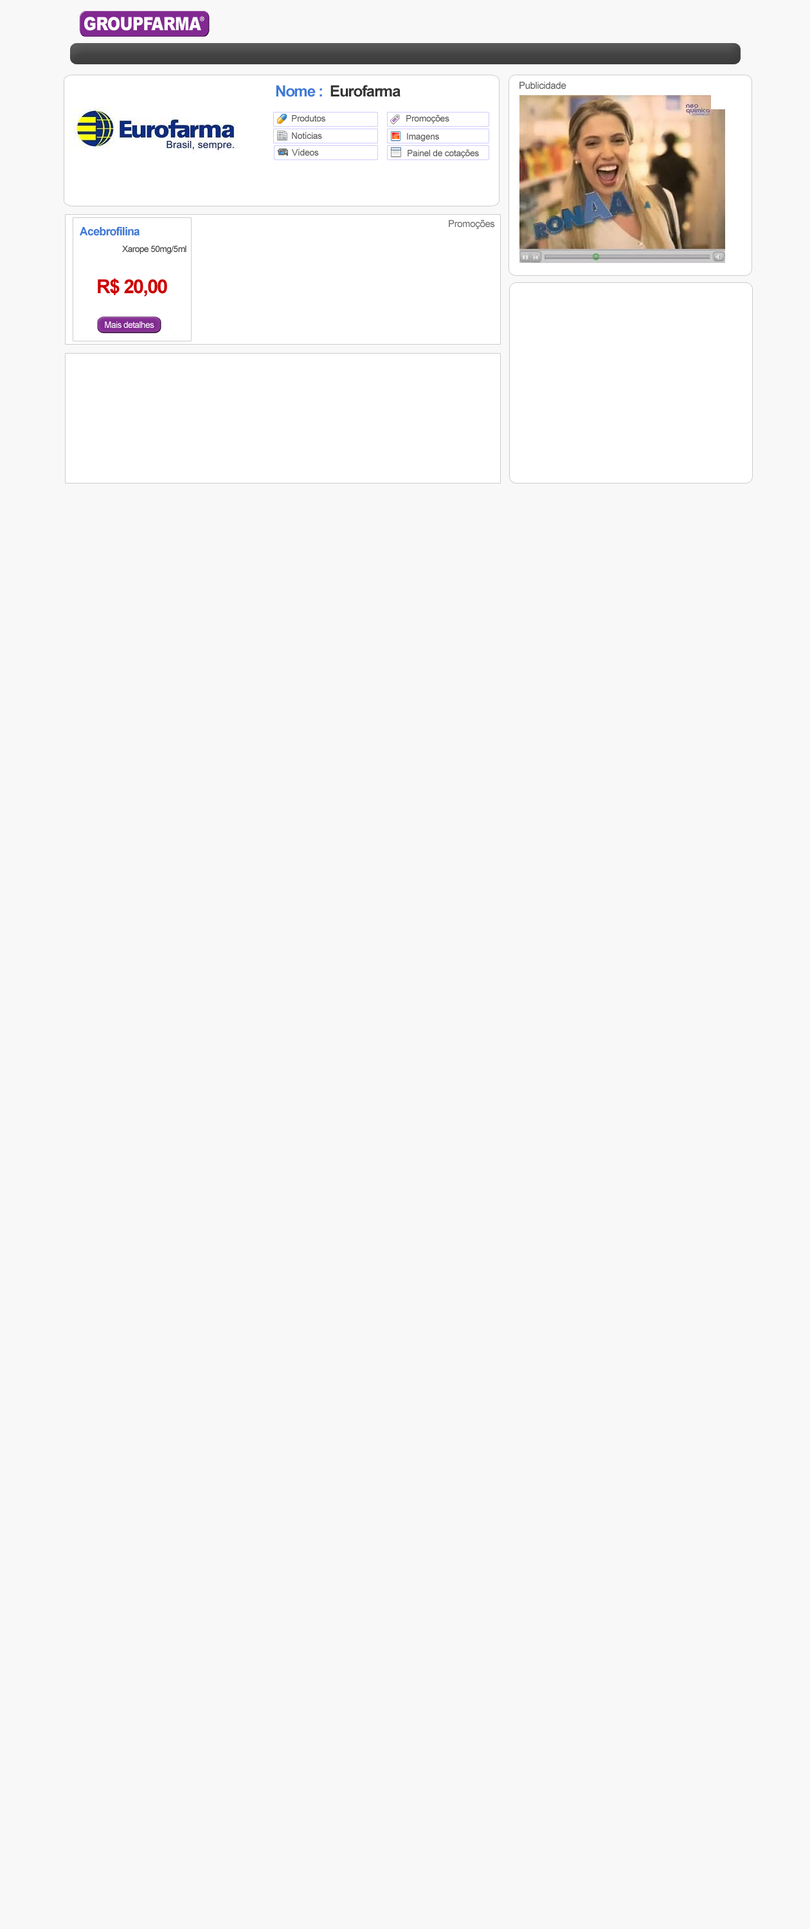
<style>
.page{position:relative;width:810px;height:1929px;background:#f8f8f8}
.page>*{position:absolute;margin:0}
.t1{font:18.5px "Arial-Black";letter-spacing:-0.025em;color:#fefefe;scale:0.83 1}
.t2{font:15.4px "Arial-BoldMT";letter-spacing:-0.05em;color:#333333}
.t3{font:15.4px "Arial-BoldMT";letter-spacing:-0.05em;color:#4179d5}
.t4{font:9.6px "ArialMT";letter-spacing:-0.025em;color:#595958}
.t5{font:9px "ArialMT";letter-spacing:-0.025em;color:#595958}
.t6{font:9.6px "ArialMT";letter-spacing:-0.025em;color:#666666}
.t7{font:11.6px "Arial-BoldMT";letter-spacing:-0.05em;color:#4179d5}
.t8{font:9px "ArialMT";letter-spacing:-0.05em;color:#414141}
.t9{font:19.3px "Arial-BoldMT";letter-spacing:-0.05em;color:#cc0000}
.t10{font:9px "ArialMT";letter-spacing:-0.05em;color:#fdfdfd}
</style>
<div class="page">
<p class="t1" style="left:84px;top:17px;width:117px;height:14px">GROUPFARMA</p>
<p class="t2" style="left:276px;top:85px;width:125px;height:12px"><span class="t3">Nome :  </span>Eurofarma</p>
<p class="t4" style="left:519px;top:82px;width:47px;height:7px">Publicidade</p>
<p class="t5" style="left:292px;top:115px;width:33px;height:7px">Produtos</p>
<p class="t5" style="left:406px;top:114px;width:43px;height:9px">Promoções</p>
<p class="t5" style="left:292px;top:132px;width:30px;height:7px">Notícias</p>
<p class="t5" style="left:407px;top:133px;width:32px;height:8px">Imagens</p>
<p class="t5" style="left:292px;top:148px;width:27px;height:8px">Vídeos</p>
<p class="t5" style="left:408px;top:149px;width:71px;height:9px">Painel de cotações</p>
<p class="t6" style="left:449px;top:220px;width:46px;height:10px">Promoções</p>
<p class="t7" style="left:80px;top:226px;width:60px;height:10px">Acebrofilina</p>
<p class="t8" style="left:122px;top:246px;width:64px;height:8px">Xarope 50mg/5ml</p>
<p class="t9" style="left:98px;top:278px;width:69px;height:18px">R$ 20,00</p>
<p class="t10" style="left:105px;top:321px;width:49px;height:7px">Mais detalhes</p>
</div>
